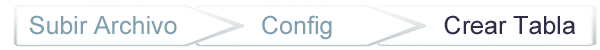
<style>
.page{position:relative;width:600px;height:50px;background:#ffffff}
.page>*{position:absolute;margin:0}
.t1{font:25px "ArialMT";color:#7e9faf}
.t2{font:25px "ArialMT";color:#2d2d48}
</style>
<div class="page">
<p class="t1" style="left:29px;top:15px;width:148px;height:20px">Subir Archivo</p>
<p class="t1" style="left:262px;top:15px;width:70px;height:25px">Config</p>
<p class="t2" style="left:444px;top:15px;width:131px;height:20px">Crear Tabla</p>
</div>
